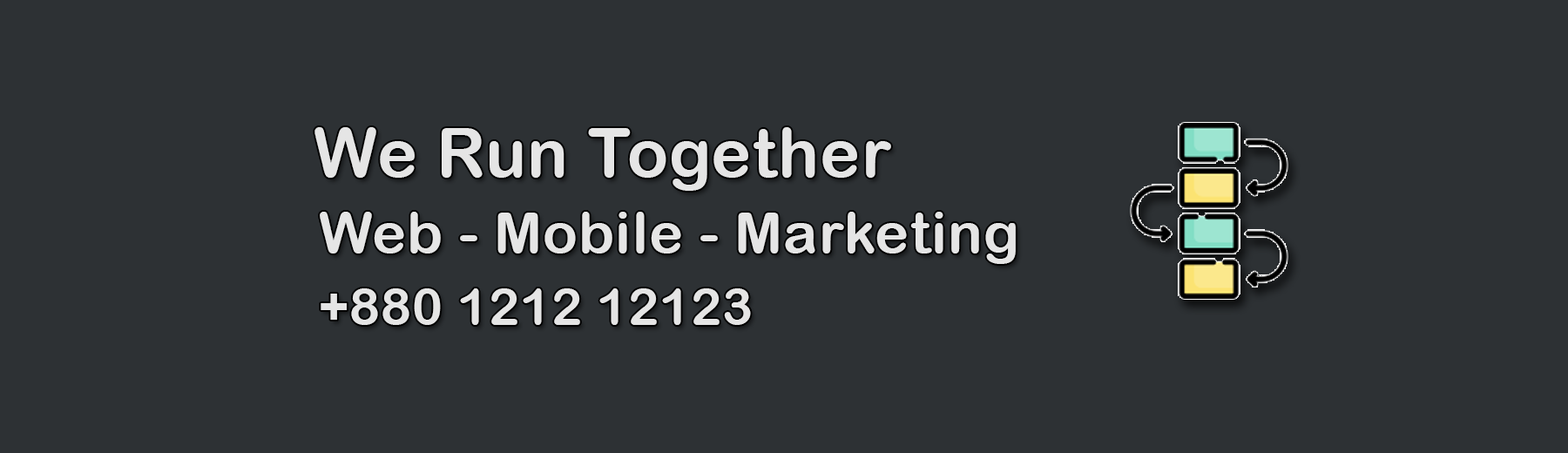
<style>
.page{position:relative;width:1568px;height:453px;background:#2d3134}
.page>*{position:absolute;margin:0}
.t1{font:67.8px "ArialRoundedMTBold";letter-spacing:0.02em;color:#e5e5e5}
.t2{font:57px "ArialRoundedMTBold";letter-spacing:0.02em;color:#e5e5e5}
.t3{font:51px "ArialRoundedMTBold";letter-spacing:0.02em;color:#e5e5e5}
</style>
<div class="page">
<p class="t1" style="left:314px;top:127px;width:577px;height:64px">We Run Together</p>
<p class="t2" style="left:320px;top:212px;width:696px;height:52px">Web - Mobile - Marketing</p>
<p class="t3" style="left:321px;top:288px;width:430px;height:37px">+880 1212 12123</p>
</div>
